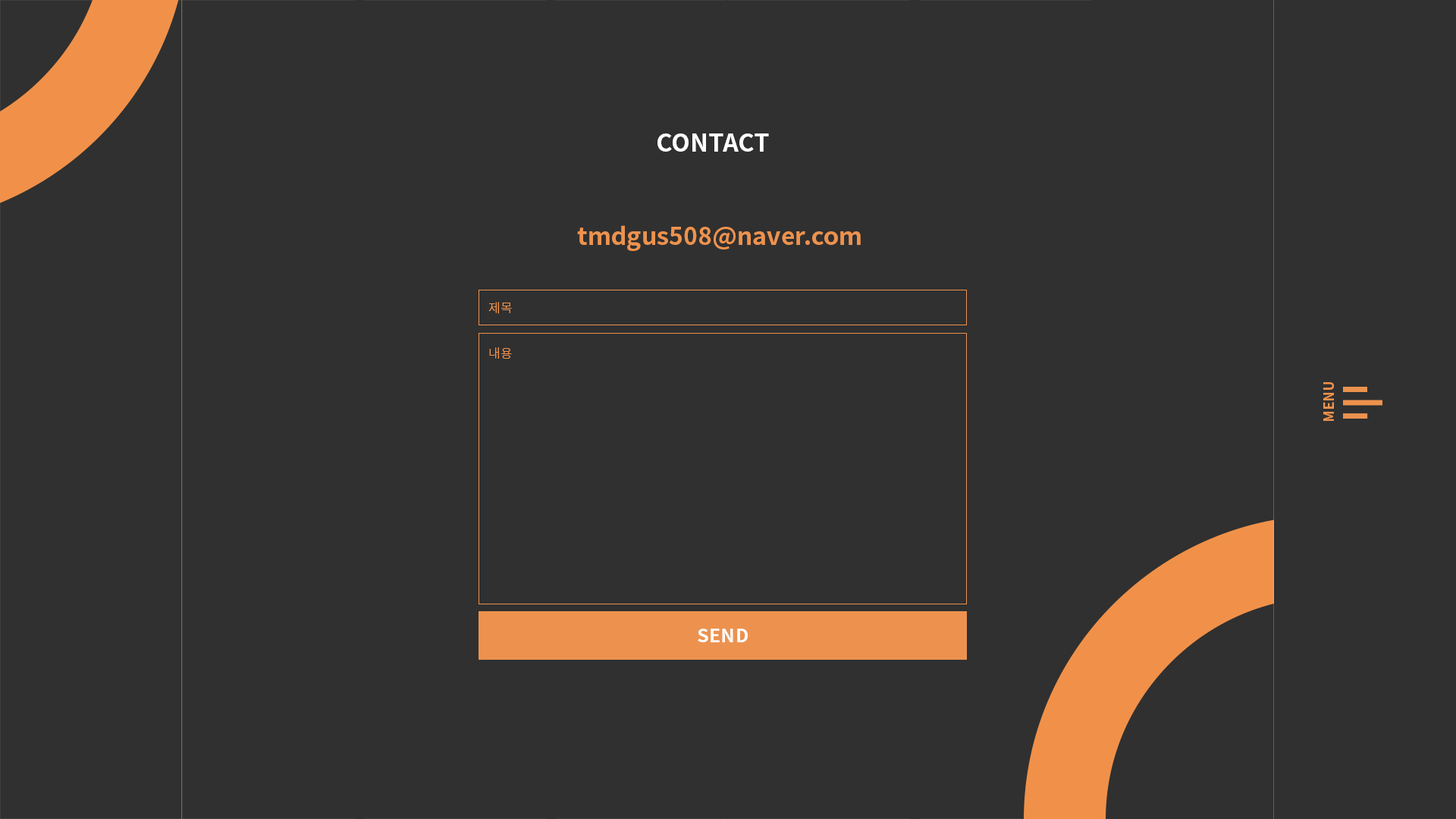
<style>
.page{position:relative;width:1456px;height:819px;background:#303030}
.page>*{position:absolute;margin:0}
.t1{font:24.4px "NotoSansKR-Bold";color:#ffffff}
.t2{font:24.4px "NotoSansKR-Bold";color:#ed924e}
.t3{font:12.6px "NotoSansKR-Light";letter-spacing:0.025em;color:#ed924e}
.t4{font:13.6px "NotoSansKR-Bold";letter-spacing:0.025em;color:#f0934c}
.t5{font:18.1px "NotoSansKR-Bold";letter-spacing:0.025em;color:#ffffff;scale:1.03 1}
</style>
<div class="page">
<p class="t1" style="left:657px;top:133px;width:112px;height:19px">CONTACT</p>
<p class="t2" style="left:577px;top:225px;width:284px;height:26px">tmdgus508@naver.com</p>
<p class="t3" style="left:488px;top:302px;width:24px;height:12px">제목</p>
<p class="t3" style="left:489px;top:347px;width:23px;height:12px">내용</p>
<p class="t4" style="left:1323px;top:382px;width:11px;height:39px;rotate:-90deg">MENU</p>
<p class="t5" style="left:698px;top:629px;width:50px;height:13px">SEND</p>
</div>
